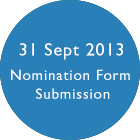
<style>
.page{position:relative;width:140px;height:140px;background:#2980b9}
.page>*{position:absolute;margin:0}
.t1{font:18px "GillSans";letter-spacing:0.05em;color:#ffffff}
.t2{font:15.1px/18.7px "GillSans";letter-spacing:0.05em;color:#ffffff}
</style>
<div class="page">
<p class="t1" style="left:19px;top:43px;width:104px;height:17px">31 Sept 2013</p>
<p class="t2" style="left:11px;top:69px;width:119px;height:30px;text-align:center">Nomination Form <br>Submission</p>
</div>
